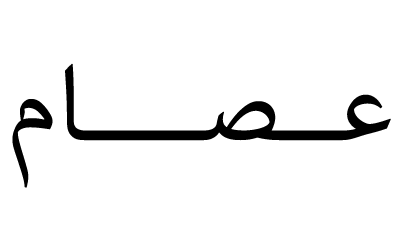
<style>
.page{position:relative;width:400px;height:251px;background:#ffffff}
.page>*{position:absolute;margin:0}
.t1{font:151px "AdobeArabic-Regular";color:#000000}
</style>
<div class="page">
<p class="t1" style="left:12px;top:63px;width:379px;height:125px">ﻡﺎــــﺼــﻋ</p>
</div>
